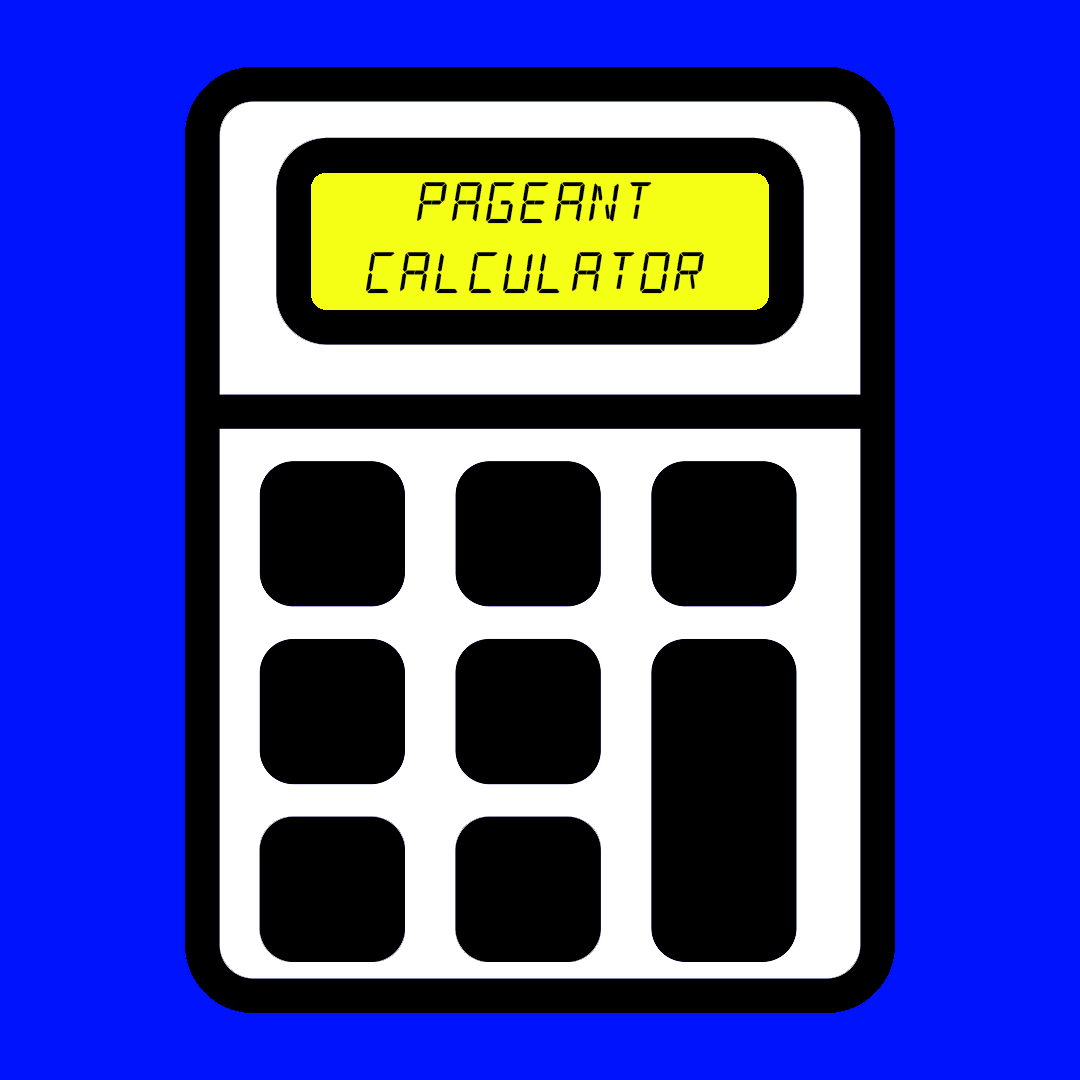
<style>
.page{position:relative;width:1080px;height:1080px;background:#0013fd}
.page>*{position:absolute;margin:0}
.t1{font:58.4px "alarmclock";color:#000000}
</style>
<div class="page">
<p class="t1" style="left:365px;top:182px;width:339px;height:112px;text-align:center">pAGEANT<br>CALCULATOR</p>
</div>
